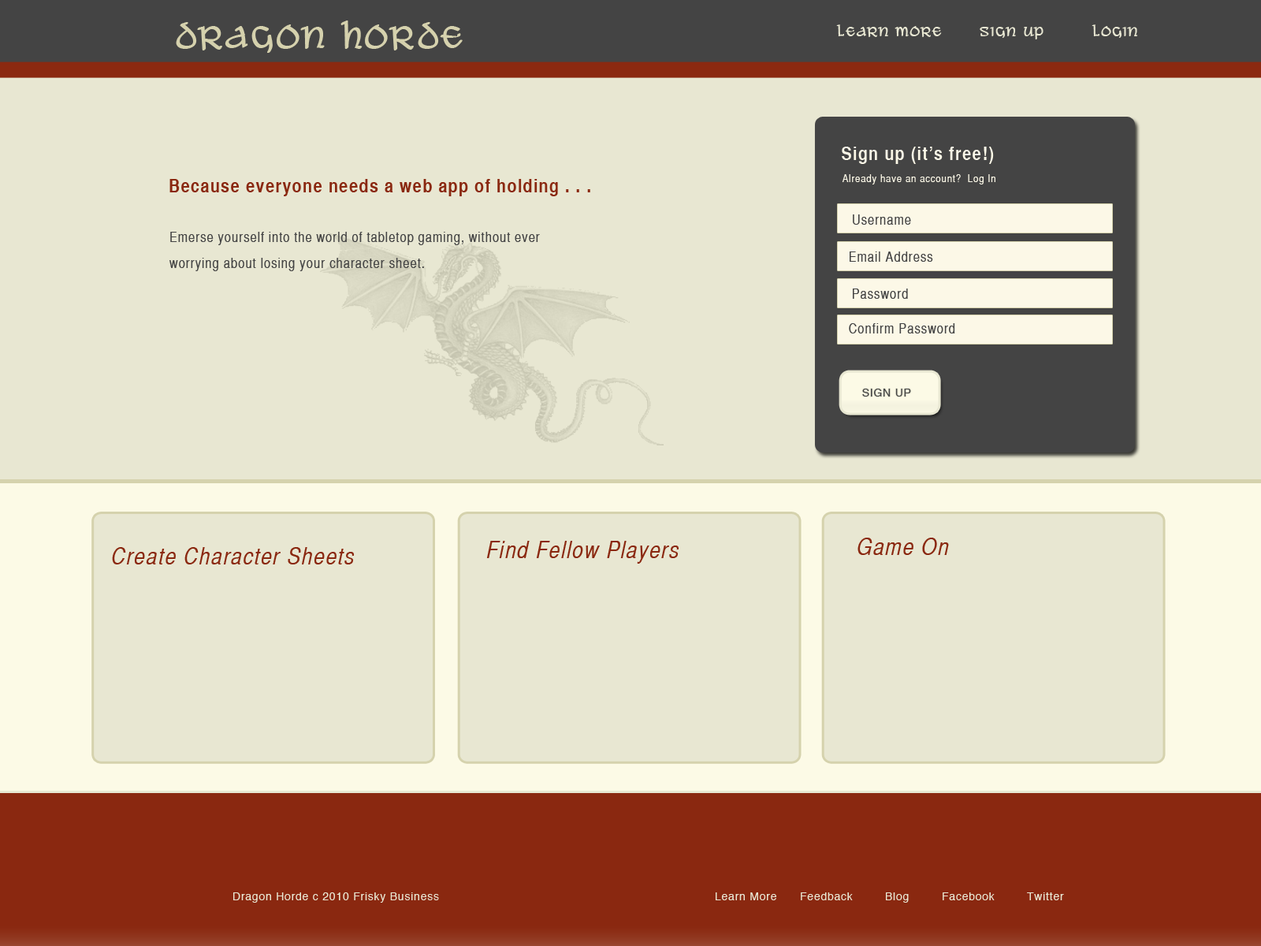
<style>
.page{position:relative;width:1261px;height:946px;background:#e8e7d2}
.page>*{position:absolute;margin:0}
.t1{font:33.3px "AleandWenchesBB";letter-spacing:0.055em;color:#d5d1ad}
.t2{font:14.2px "AleandWenchesBB";letter-spacing:0.055em;color:#e9e8d3}
.t3{font:18.9px "HelveticaCYBold";letter-spacing:0.055em;color:#fcf8e7}
.t4{font:18.9px "HelveticaCYBold";letter-spacing:0.055em;color:#8a2810}
.t5{font:11px "HelveticaCYPlain";letter-spacing:0.055em;color:#fcf8e7}
.t6{font:14.2px "HelveticaCYPlain";letter-spacing:0.055em;color:#444444}
.t7{font:14.2px/26.1px "HelveticaCYPlain";letter-spacing:0.055em;color:#444444}
.t8{font:11px "Helvetica";letter-spacing:0.055em;color:#444444}
.t9{font:23.6px "HelveticaCYOblique";letter-spacing:0.055em;color:#8a2810}
.t10{font:11px "Helvetica";letter-spacing:0.055em;color:#e8e7d3}
</style>
<div class="page">
<p class="t1" style="left:176px;top:20px;width:287px;height:33px">Dragon Horde</p>
<p class="t2" style="left:836px;top:24px;width:302px;height:15px">Learn More  Sign Up  Login</p>
<p class="t3" style="left:842px;top:147px;width:152px;height:17px">Sign up (it’s free!)</p>
<p class="t4" style="left:169px;top:179px;width:421px;height:17px">Because everyone needs a web app of holding . . .</p>
<p class="t5" style="left:842px;top:174px;width:153px;height:10px">Already have an account?  Log In</p>
<p class="t6" style="left:853px;top:214px;width:58px;height:11px">Username</p>
<p class="t7" style="left:169px;top:232px;width:371px;height:39px;text-align:justify">Emerse yourself into the world of tabletop gaming, without ever worrying about losing your character sheet.</p>
<p class="t6" style="left:850px;top:251px;width:83px;height:11px">Email Address</p>
<p class="t6" style="left:853px;top:288px;width:55px;height:11px">Password</p>
<p class="t6" style="left:849px;top:323px;width:106px;height:10px">Confirm Password</p>
<p class="t8" style="left:862px;top:389px;width:49px;height:7px">SIGN UP</p>
<p class="t9" style="left:486px;top:541px;width:193px;height:22px">Find Fellow Players</p>
<p class="t9" style="left:857px;top:537px;width:92px;height:18px">Game On</p>
<p class="t9" style="left:112px;top:547px;width:243px;height:17px">Create Character Sheets</p>
<p class="t10" style="left:233px;top:892px;width:831px;height:10px">Dragon Horde c 2010 Frisky Business          Learn More Feedback  Blog  Facebook  Twitter</p>
</div>
